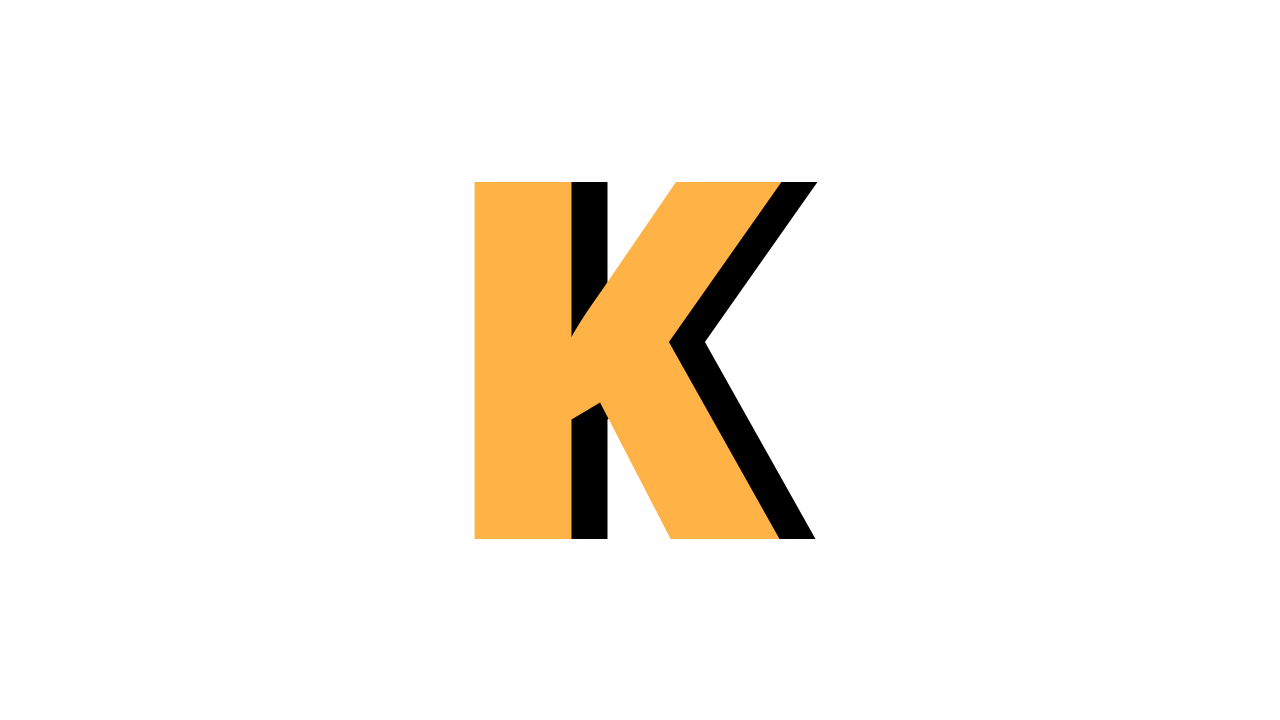
<style>
.page{position:relative;width:1280px;height:720px;background:#ffffff}
.page>*{position:absolute;margin:0}
.t1{font:500px "OpenSans-Extrabold";color:#ffb347}
.t2{font:500px "OpenSans-Extrabold"}
</style>
<div class="page">
<p class="t1" style="left:474px;top:182px;width:308px;height:357px">K</p>
<p class="t2" style="left:510px;top:182px;width:308px;height:357px">K</p>
</div>
